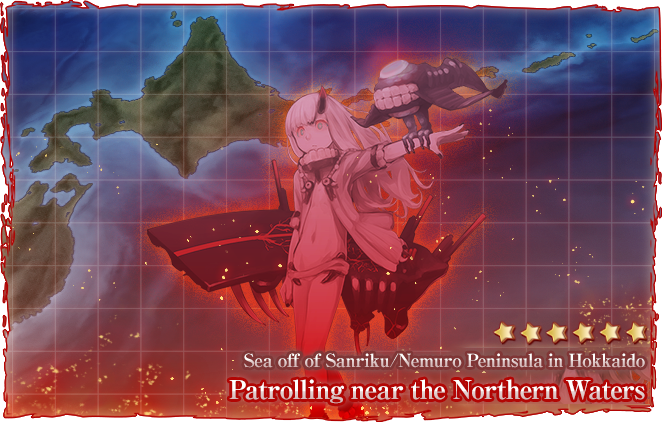
<style>
.page{position:relative;width:662px;height:422px}
.page>*{position:absolute;margin:0}
.t1{font:18px "RyuminPro-ExBold";letter-spacing:-0.04em}
.t2{font:26px "RyuminPro-ExBold";letter-spacing:-0.04em}
</style>
<div class="page">
<p class="t1" style="left:244px;top:353px;width:401px;height:15px">Sea off of Sanriku/Nemuro Peninsula in Hokkaido</p>
<p class="t2" style="left:229px;top:379px;width:416px;height:25px">Patrolling near the Northern Waters</p>
</div>
